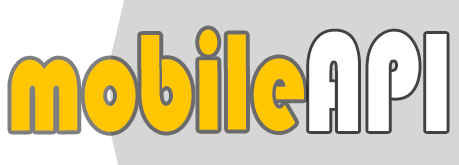
<style>
.page{position:relative;width:459px;height:165px;background:#d6d6d6}
.page>*{position:absolute;margin:0}
.t1{font:141.9px "Bauhaus93";color:#ffc601;scale:0.69 1}
.t2{font:144.9px "Bauhaus93";color:#ffffff;scale:0.69 1}
</style>
<div class="page">
<p class="t1" style="left:11px;top:29px;width:293px;height:103px">mobile</p>
<p class="t2" style="left:309px;top:31px;width:138px;height:100px">API</p>
<p class="t2" style="left:309px;top:31px;width:138px;height:100px">API</p>
</div>
